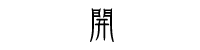
<style>
.page{position:relative;width:200px;height:50px;background:#ffffff}
.page>*{position:absolute;margin:0}
.t1{font:36px "DFJinWen-W3-WIN-BF";color:#000000;font-weight:bold}
</style>
<div class="page">
<p class="t1" style="left:90px;top:8px;width:24px;height:34px">開</p>
</div>
